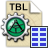
<style>
.page{position:relative;width:48px;height:48px}
.page>*{position:absolute;margin:0}
.t1{font:9.5px "Arial-BoldMT";color:#000000}
</style>
<div class="page">
<p class="t1" style="left:9px;top:3px;width:19px;height:8px">TBL</p>
</div>
